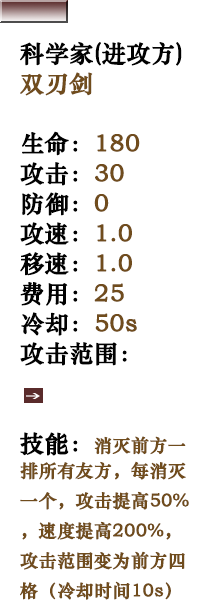
<style>
.page{position:relative;width:200px;height:600px;background:#ffffff}
.page>*{position:absolute;margin:0}
.t1{font:18px/30px "STZhongsong";color:#704c1d;font-weight:bold}
.t2{font:24px/30px "STZhongsong";color:#010101;font-weight:bold}
.t3{font:24px/30px "STZhongsong";color:#704c1d;font-weight:bold}
</style>
<div class="page">
<p class="t1" style="left:20px;top:41px;width:169px;height:559px"><span class="t2">科学家(进攻方)<br></span><span class="t3">双刃剑<br><br></span><span class="t2">生命：</span><span class="t3">180<br></span><span class="t2">攻击：</span><span class="t3">30<br></span><span class="t2">防御：</span><span class="t3">0<br></span><span class="t2">攻速：</span><span class="t3">1.0<br></span><span class="t2">移速：</span><span class="t3">1.0<br></span><span class="t2">费用：</span><span class="t3">25<br></span><span class="t2">冷却：</span><span class="t3">50s<br></span><span class="t2">攻击范围：<br><br><br>技能：</span>消灭前方一排所有友方，每消灭一个，攻击提高50%，速度提高200%，攻击范围变为前方四格（冷却时间10s）</p>
</div>
